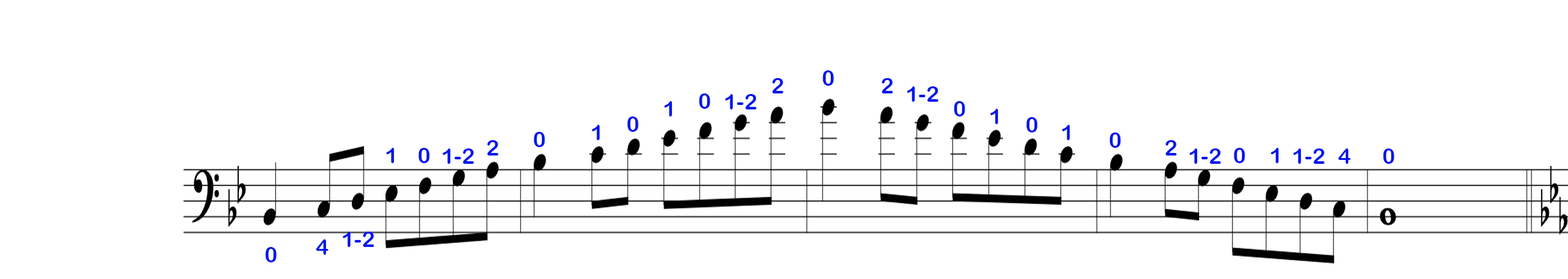
<style>
.page{position:relative;width:1568px;height:279px;background:#ffffff}
.page>*{position:absolute;margin:0}
.t1{font:21.8px "ArialRoundedMTBold";color:#0417ec}
</style>
<div class="page">
<p class="t1" style="left:822px;top:70px;width:12px;height:16px">0</p>
<p class="t1" style="left:772px;top:78px;width:11px;height:16px">2</p>
<p class="t1" style="left:881px;top:78px;width:12px;height:16px">2</p>
<p class="t1" style="left:907px;top:86px;width:31px;height:16px">1-2</p>
<p class="t1" style="left:664px;top:101px;width:9px;height:16px">1</p>
<p class="t1" style="left:699px;top:94px;width:11px;height:15px">0</p>
<p class="t1" style="left:725px;top:94px;width:31px;height:16px">1-2</p>
<p class="t1" style="left:954px;top:101px;width:11px;height:16px">0</p>
<p class="t1" style="left:990px;top:109px;width:9px;height:15px">1</p>
<p class="t1" style="left:592px;top:125px;width:8px;height:15px">1</p>
<p class="t1" style="left:627px;top:117px;width:12px;height:15px">0</p>
<p class="t1" style="left:1026px;top:117px;width:12px;height:16px">0</p>
<p class="t1" style="left:1062px;top:125px;width:8px;height:15px">1</p>
<p class="t1" style="left:534px;top:132px;width:11px;height:15px">0</p>
<p class="t1" style="left:1109px;top:133px;width:12px;height:15px">0</p>
<p class="t1" style="left:386px;top:148px;width:9px;height:15px">1</p>
<p class="t1" style="left:418px;top:148px;width:12px;height:15px">0</p>
<p class="t1" style="left:443px;top:149px;width:31px;height:15px">1-2</p>
<p class="t1" style="left:487px;top:140px;width:11px;height:16px">2</p>
<p class="t1" style="left:1165px;top:140px;width:12px;height:16px">2</p>
<p class="t1" style="left:1189px;top:149px;width:32px;height:15px">1-2</p>
<p class="t1" style="left:1234px;top:148px;width:11px;height:15px">0</p>
<p class="t1" style="left:1271px;top:148px;width:8px;height:15px">1</p>
<p class="t1" style="left:1293px;top:149px;width:32px;height:15px">1-2</p>
<p class="t1" style="left:1338px;top:149px;width:13px;height:15px">4</p>
<p class="t1" style="left:1383px;top:149px;width:11px;height:15px">0</p>
<p class="t1" style="left:343px;top:232px;width:31px;height:15px">1-2</p>
<p class="t1" style="left:316px;top:240px;width:13px;height:15px">4</p>
<p class="t1" style="left:265px;top:247px;width:12px;height:16px">0</p>
</div>
